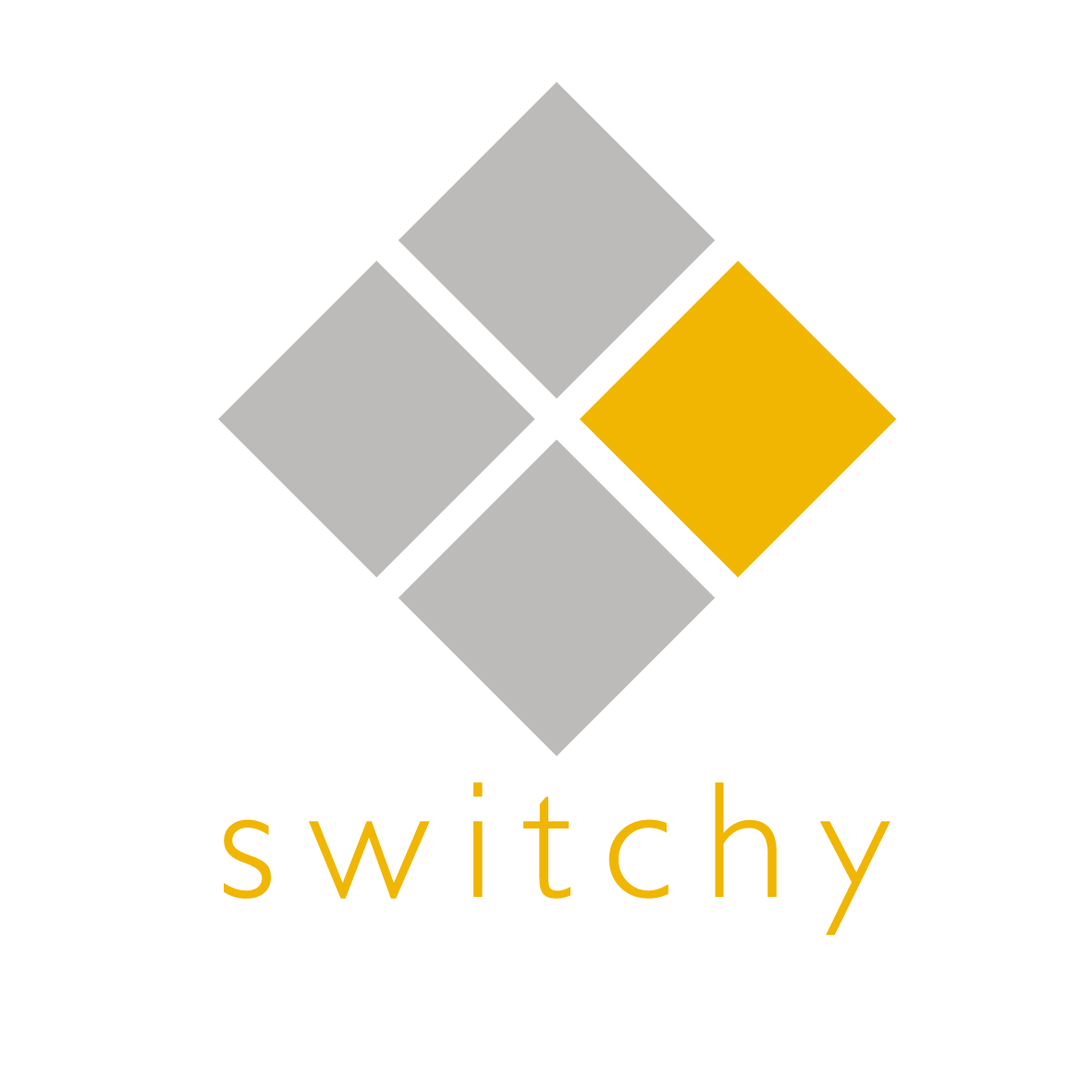
<style>
.page{position:relative;width:1092px;height:1092px;background:#ffffff}
.page>*{position:absolute;margin:0}
.t1{font:286.8px "Humanist521BT-Light";letter-spacing:0.2em;color:#f0b602}
</style>
<div class="page">
<p class="t1" style="left:224px;top:782px;width:666px;height:154px">switchy</p>
</div>
